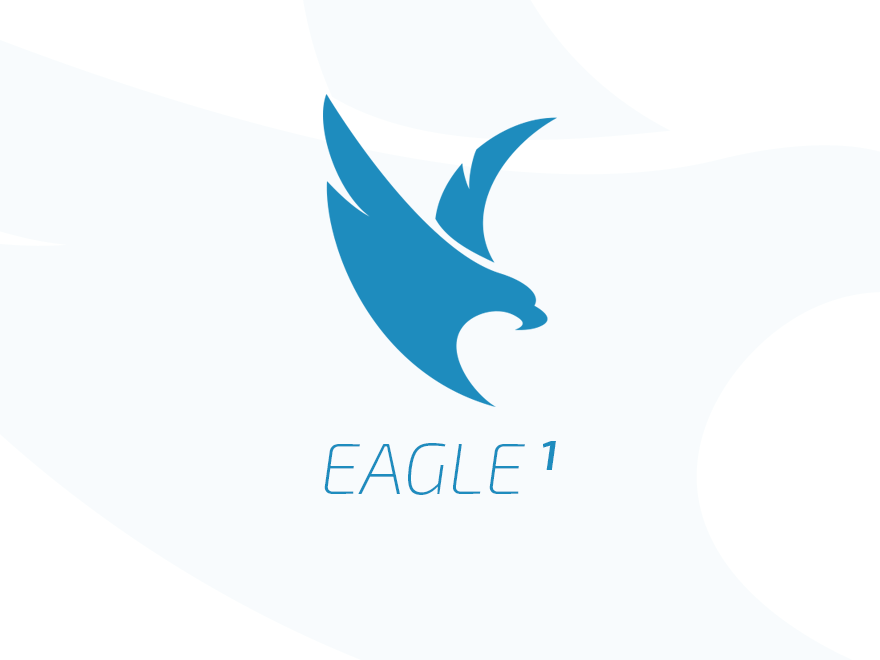
<style>
.page{position:relative;width:880px;height:660px;background:#f8fbfd}
.page>*{position:absolute;margin:0}
.t1{font:72.6px "Exo2.0-ExtraLightItalic";color:#1e8cbe;text-transform:uppercase}
.t2{font:72.6px "Exo2.0-SemiBoldItalic";color:#1e8cbe;text-transform:uppercase}
</style>
<div class="page">
<p class="t1" style="left:324px;top:441px;width:232px;height:54px">Eagle <span class="t2">1</span></p>
</div>
